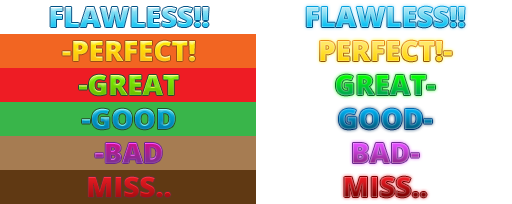
<style>
.page{position:relative;width:512px;height:204px;background:#ffffff}
.page>*{position:absolute;margin:0}
.t1{font:28px "OpenSans-Extrabold"}
</style>
<div class="page">
<p class="t1" style="left:306px;top:6px;width:159px;height:22px">FLAWLESS!!</p>
<p class="t1" style="left:50px;top:7px;width:159px;height:20px">FLAWLESS!!</p>
<p class="t1" style="left:62px;top:40px;width:133px;height:22px">-PERFECT!</p>
<p class="t1" style="left:320px;top:40px;width:132px;height:22px">PERFECT!-</p>
<p class="t1" style="left:79px;top:74px;width:100px;height:22px">-GREAT</p>
<p class="t1" style="left:336px;top:74px;width:99px;height:22px">GREAT-</p>
<p class="t1" style="left:82px;top:108px;width:93px;height:22px">-GOOD</p>
<p class="t1" style="left:339px;top:108px;width:93px;height:22px">GOOD-</p>
<p class="t1" style="left:95px;top:143px;width:67px;height:20px">-BAD</p>
<p class="t1" style="left:353px;top:143px;width:66px;height:20px">BAD-</p>
<p class="t1" style="left:88px;top:176px;width:83px;height:22px">MISS..</p>
<p class="t1" style="left:344px;top:176px;width:83px;height:22px">MISS..</p>
</div>
